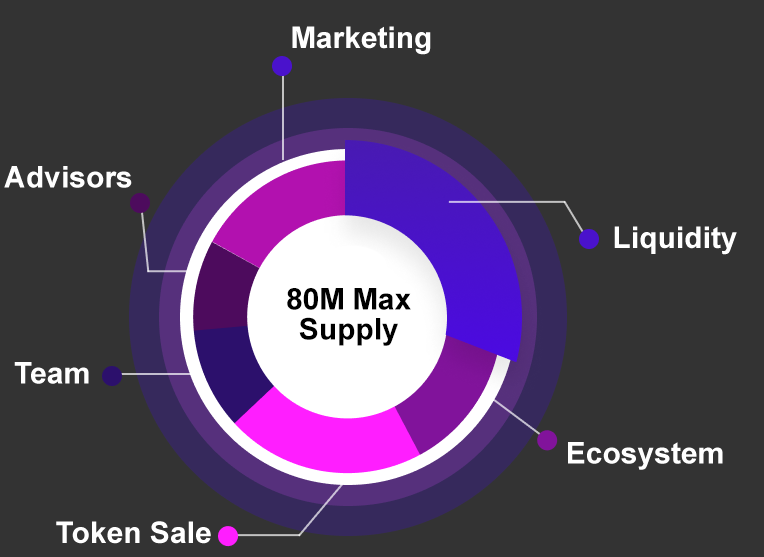
<style>
.page{position:relative;width:764px;height:557px;background:#333333}
.page>*{position:absolute;margin:0}
.t1{font:30px "Arial-BoldMT";color:#ffffff}
</style>
<div class="page">
<p class="t1" style="left:292px;top:26px;width:139px;height:29px">Marketing</p>
<p class="t1" style="left:4px;top:166px;width:128px;height:22px">Advisors</p>
<p class="t1" style="left:614px;top:226px;width:123px;height:29px">Liquidity</p>
<p class="t1" style="left:14px;top:362px;width:75px;height:22px">Team</p>
<p class="t1" style="left:568px;top:442px;width:155px;height:28px">Ecosystem</p>
<p class="t1" style="left:56px;top:521px;width:155px;height:23px">Token Sale</p>
</div>
